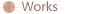
<style>
.page{position:relative;width:103px;height:14px;background:#ffffff}
.page>*{position:absolute;margin:0}
.t1{font:12px "MicrosoftYaHei";color:#9d7065}
</style>
<div class="page">
<p class="t1" style="left:21px;top:1px;width:37px;height:10px">Works</p>
</div>
